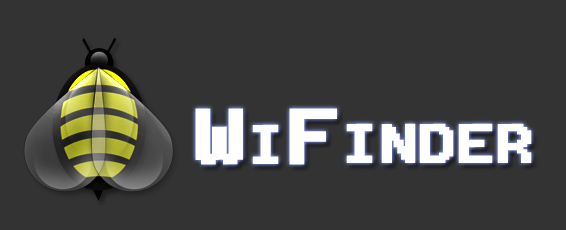
<style>
.page{position:relative;width:566px;height:230px;background:#333333}
.page>*{position:absolute;margin:0}
.t1{font:96.7px "8514oem";color:#ffffff;font-variant:small-caps;font-weight:bold;scale:1.21 1}
</style>
<div class="page">
<p class="t1" style="left:195px;top:108px;width:337px;height:57px">WiFinder</p>
</div>
